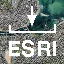
<style>
.page{position:relative;width:64px;height:64px}
.page>*{position:absolute;margin:0}
.t1{font:21.3px "HelveticaNeue-Bold";color:#ffffff}
</style>
<div class="page">
<p class="t1" style="left:9px;top:40px;width:47px;height:17px">ESRI</p>
</div>
